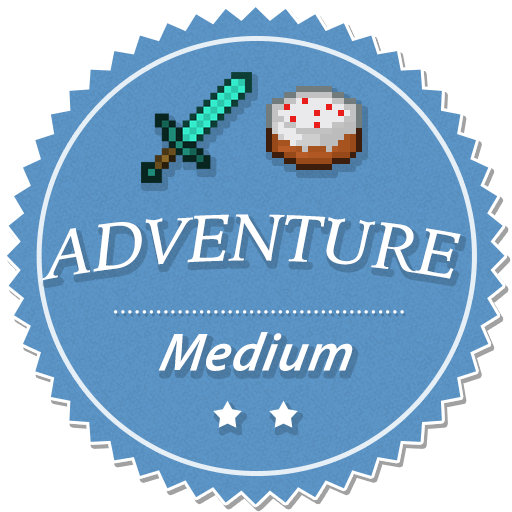
<style>
.page{position:relative;width:512px;height:512px;background:#ffffff}
.page>*{position:absolute;margin:0}
.t1{font:68px "IowanOldStyle-Italic";color:#ffffff;text-transform:uppercase}
.t2{font:28.6px "TimesNewRomanPSMT";color:#ffffff}
.t3{font:54.1px "MyriadPro-SemiboldIt";letter-spacing:0.025em;color:#ffffff;font-style:italic}
</style>
<div class="page">
<p class="t1" style="left:42px;top:214px;width:419px;height:66px">Adventure</p>
<p class="t1" style="left:42px;top:214px;width:419px;height:66px">Adventure</p>
<p class="t2" style="left:114px;top:310px;width:290px;height:4px">.........................................</p>
<p class="t2" style="left:114px;top:310px;width:290px;height:4px">.........................................</p>
<p class="t2" style="left:114px;top:310px;width:290px;height:4px">.........................................</p>
<p class="t3" style="left:158px;top:332px;width:195px;height:39px">Medium</p>
</div>
